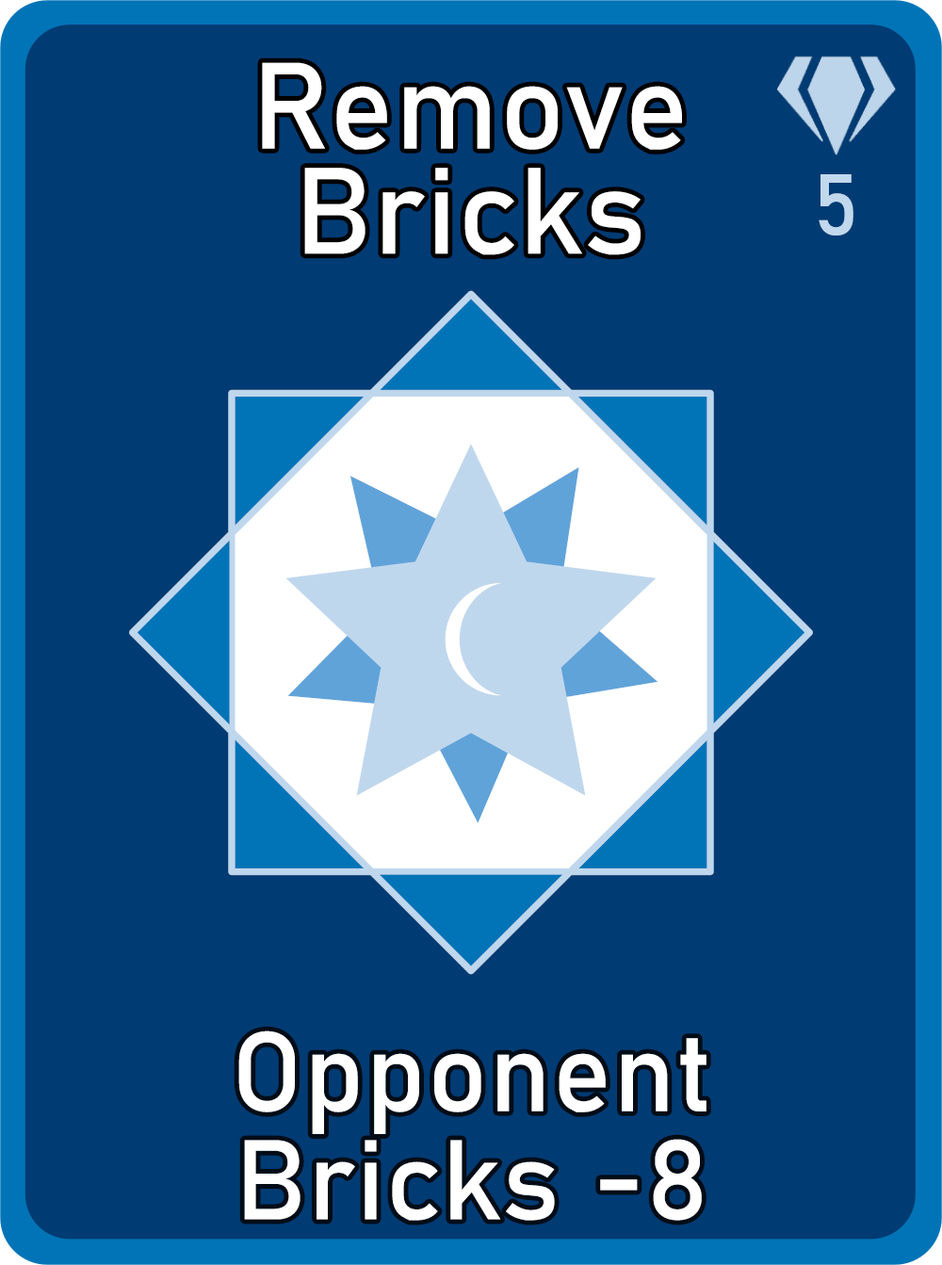
<style>
.page{position:relative;width:942px;height:1265px;background:#003b73}
.page>*{position:absolute;margin:0}
.t1{font:120.6px/105.1px "Bahnschrift";letter-spacing:0.01em;color:#ffffff}
.t2{font:85px "Bahnschrift";letter-spacing:0.01em;color:#c1d8ed}
.t3{font:111.3px/108.2px "Bahnschrift";letter-spacing:0.01em;color:#ffffff}
</style>
<div class="page">
<p class="t1" style="left:262px;top:62px;width:420px;height:193px;text-align:center">Remove<br>Bricks</p>
<p class="t2" style="left:819px;top:174px;width:35px;height:62px">5</p>
<p class="t3" style="left:238px;top:1031px;width:469px;height:190px;text-align:center">Opponent<br>Bricks -8</p>
</div>
